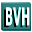
<style>
.page{position:relative;width:32px;height:32px;background:#ffffff}
.page>*{position:absolute;margin:0}
.t1{font:24.8px "DroidSans-Bold";letter-spacing:0.05em;color:#000000;scale:0.5 1}
.t2{font:24.8px "DroidSans-Bold";letter-spacing:0.05em;color:#ffffff;scale:0.5 1}
.t3{font:24.8px "DroidSans";letter-spacing:0.05em;color:#ffffff;scale:0.5 1}
</style>
<div class="page">
<p class="t1" style="left:4px;top:9px;width:24px;height:19px">BVH</p>
<p class="t2" style="left:6px;top:7px;width:24px;height:19px">BVH</p>
<p class="t3" style="left:6px;top:7px;width:23px;height:19px">BVH</p>
</div>
